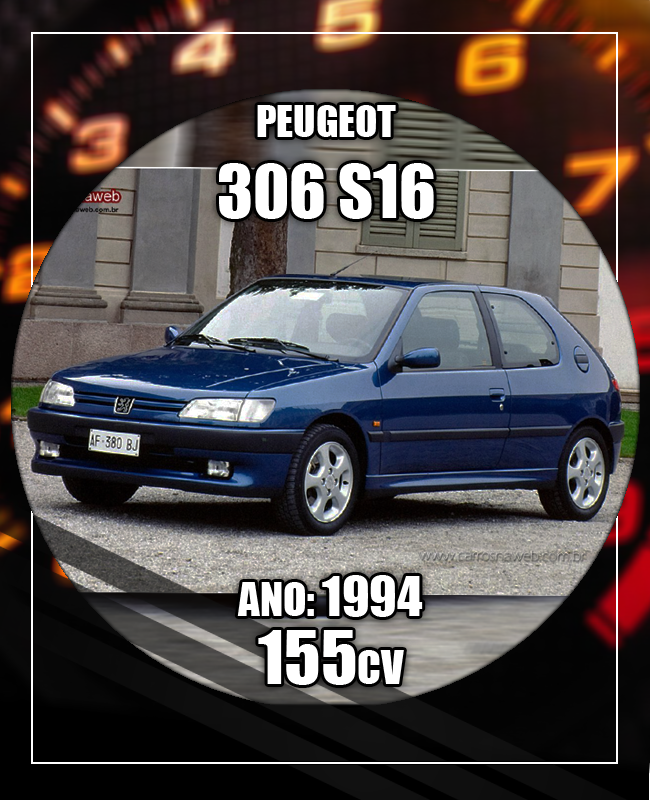
<style>
.page{position:relative;width:650px;height:800px}
.page>*{position:absolute;margin:0}
.t1{font:40.7px/81.4px "Impact";color:#ffffff;text-transform:uppercase}
.t2{font:67.8px/81.4px "Impact";color:#ffffff;text-transform:uppercase}
.t3{font:42.6px/68.2px "Impact";color:#ffffff;text-transform:uppercase}
.t4{font:51.1px/68.2px "Impact";color:#ffffff;text-transform:uppercase}
.t5{font:68.2px/68.2px "Impact";color:#ffffff;text-transform:uppercase}
</style>
<div class="page">
<p class="t1" style="left:219px;top:105px;width:215px;height:114px;text-align:center">Peugeot<br><span class="t2">306 S16</span></p>
<p class="t3" style="left:237px;top:575px;width:186px;height:110px;text-align:center">aNO: <span class="t4">1994<br></span><span class="t5">155</span>cv</p>
</div>
